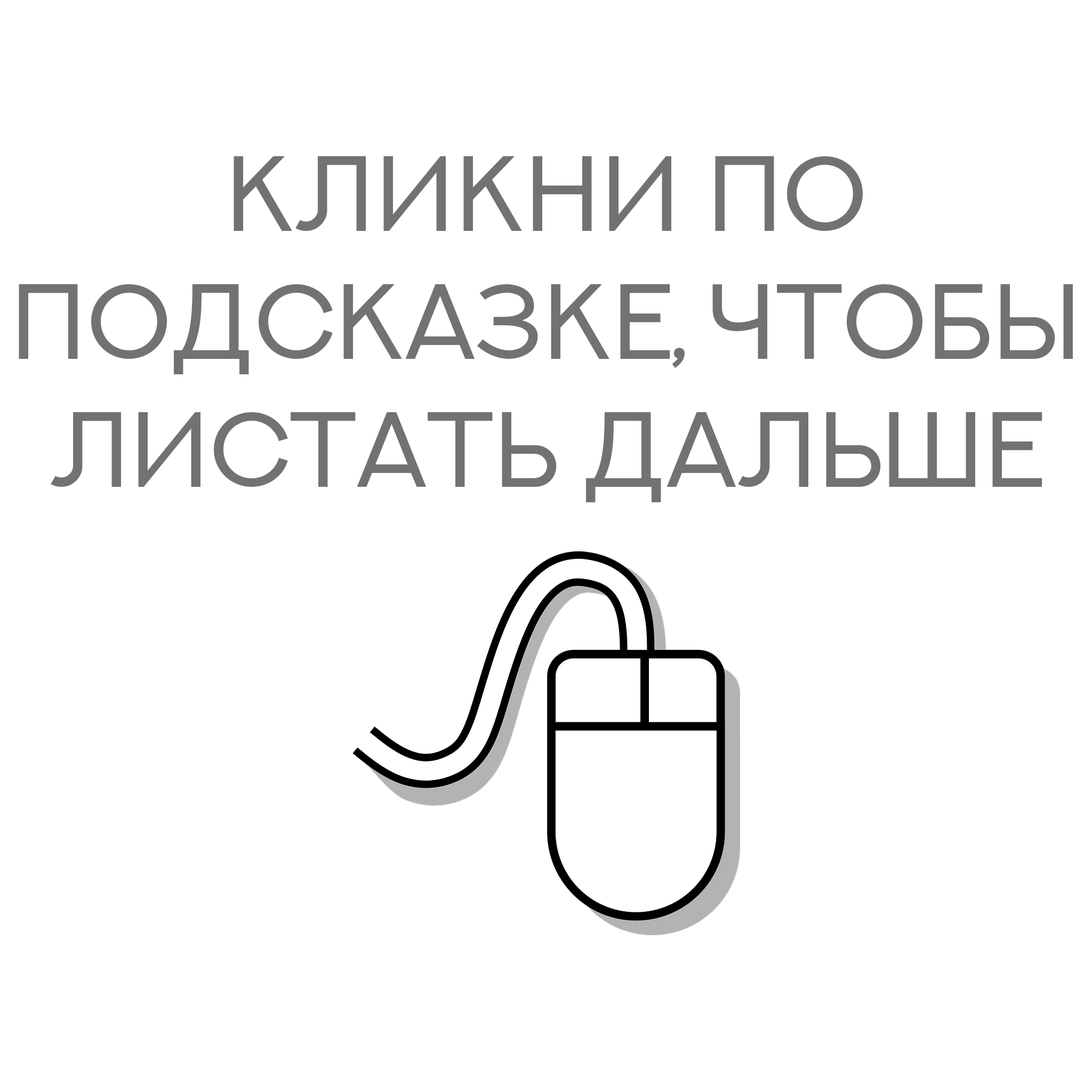
<style>
.page{position:relative;width:1092px;height:1092px;background:#ffffff}
.page>*{position:absolute;margin:0}
.t1{font:106.6px "NEXTART-Regular";color:#727272}
</style>
<div class="page">
<p class="t1" style="left:19px;top:156px;width:1054px;height:346px;text-align:center">Кликни по подсказке, чтобы листать дальше</p>
</div>
